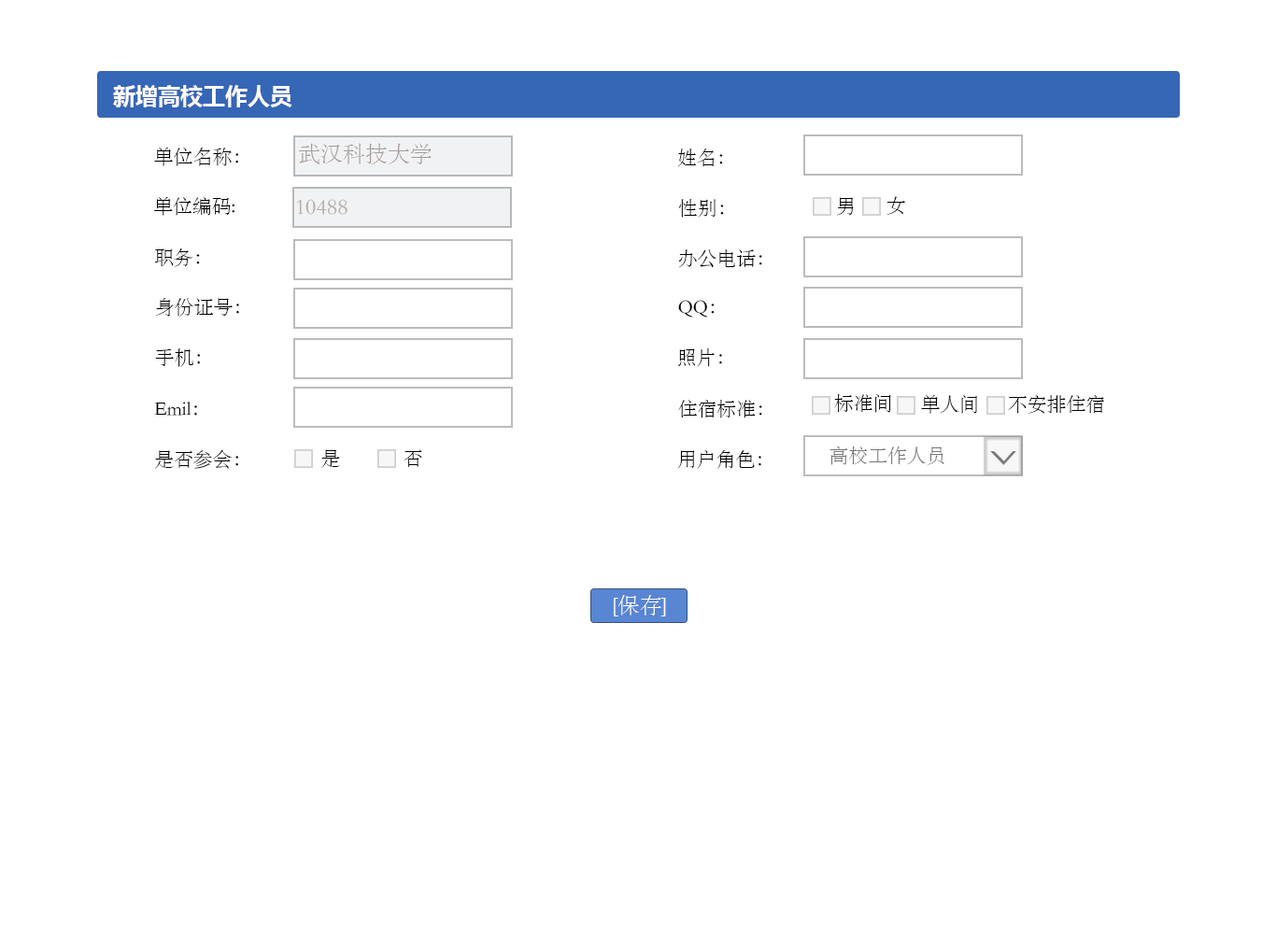
<style>
.page{position:relative;width:1276px;height:934px;background:#ffffff}
.page>*{position:absolute;margin:0}
.t1{font:22.4px "MicrosoftYaHei-Bold";color:#fffbfb}
.t2{font:19.6px "STSong";color:#000000}
.t3{font:19.5px "STSong";color:#000000}
.t4{font:22.4px "STSong";color:#a69d9d}
.t5{font:19.5px "STSong";color:#777777}
.t6{font:22.1px "STSong";color:#fffbfb}
</style>
<div class="page">
<p class="t1" style="left:113px;top:85px;width:179px;height:22px">新增高校工作人员</p>
<p class="t2" style="left:154px;top:147px;width:85px;height:19px">单位名称<span class="t3">：</span></p>
<p class="t4" style="left:299px;top:143px;width:133px;height:21px">武汉科技大学</p>
<p class="t3" style="left:677px;top:149px;width:46px;height:18px">姓名：</p>
<p class="t3" style="left:154px;top:197px;width:81px;height:19px">单位编码:</p>
<p class="t3" style="left:837px;top:197px;width:17px;height:19px">男</p>
<p class="t3" style="left:887px;top:196px;width:18px;height:19px">女</p>
<p class="t4" style="left:296px;top:199px;width:52px;height:16px">10488</p>
<p class="t3" style="left:678px;top:199px;width:46px;height:19px">性别：</p>
<p class="t3" style="left:155px;top:249px;width:45px;height:18px">职务：</p>
<p class="t3" style="left:678px;top:249px;width:84px;height:19px">办公电话：</p>
<p class="t3" style="left:156px;top:298px;width:83px;height:19px">身份证号：</p>
<p class="t3" style="left:678px;top:300px;width:37px;height:18px">QQ：</p>
<p class="t3" style="left:155px;top:348px;width:46px;height:19px">手机：</p>
<p class="t3" style="left:678px;top:348px;width:44px;height:19px">照片：</p>
<p class="t3" style="left:154px;top:402px;width:43px;height:14px">Emil：</p>
<p class="t3" style="left:678px;top:400px;width:84px;height:19px">住宿标准：</p>
<p class="t3" style="left:834px;top:394px;width:57px;height:19px">标准间</p>
<p class="t3" style="left:921px;top:395px;width:57px;height:19px">单人间</p>
<p class="t3" style="left:1008px;top:395px;width:96px;height:19px">不安排住宿</p>
<p class="t3" style="left:155px;top:449px;width:84px;height:20px">是否参会：</p>
<p class="t3" style="left:321px;top:449px;width:19px;height:19px">是</p>
<p class="t3" style="left:404px;top:449px;width:18px;height:18px">否</p>
<p class="t5" style="left:830px;top:446px;width:115px;height:19px">高校工作人员</p>
<p class="t3" style="left:677px;top:450px;width:84px;height:19px">用户角色：</p>
<p class="t6" style="left:614px;top:595px;width:52px;height:22px">[保存]</p>
</div>
